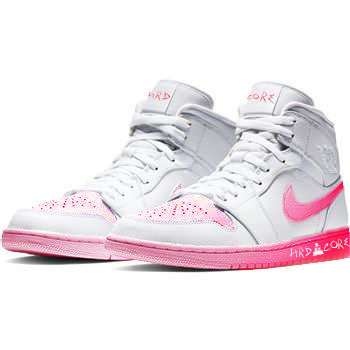
<style>
.page{position:relative;width:350px;height:350px;background:#ffffff}
.page>*{position:absolute;margin:0}
.t1{font:8px "OldScribe";color:#fe1c3c;text-transform:uppercase}
.t2{font:10.7px "OldScribe";color:#fe1c3c;text-transform:uppercase}
.t3{font:12px "OldScribe";color:#fe1c3c;text-transform:uppercase}
.t4{font:13.3px "OldScribe";text-transform:uppercase}
.t5{font:8px "OldScribe";text-transform:uppercase}
.t6{font:9.3px "OldScribe";text-transform:uppercase}
.t7{font:13.3px "OldScribe";color:#ffffff;text-transform:uppercase}
</style>
<div class="page">
<p class="t1" style="left:147px;top:91px;width:24px;height:10px;rotate:14deg">H<span class="t2">r</span><span class="t3">d</span></p>
<p class="t4" style="left:247px;top:91px;width:28px;height:13px;rotate:7deg"><span class="t5">c</span><span class="t6">o</span>re</p>
<p class="t7" style="left:289px;top:238px;width:62px;height:20px;rotate:-12deg">Hrd*Core</p>
</div>
